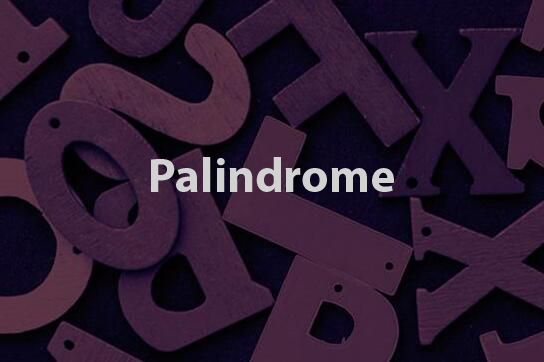
<style>
.page{position:relative;width:544px;height:362px}
.page>*{position:absolute;margin:0}
.t1{font:48px "MyriadPro-Bold";color:#d2d2d2}
</style>
<div class="page">
<p class="t1" style="left:151px;top:157px;width:243px;height:35px">Palindrome</p>
</div>
